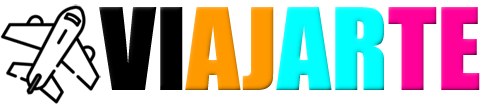
<style>
.page{position:relative;width:500px;height:104px;background:#ffffff}
.page>*{position:absolute;margin:0}
.t1{font:105.4px "Impact";color:#000000}
.t2{font:105.4px "Impact";color:#ff9900}
.t3{font:105.4px "Impact";color:#00ffff}
.t4{font:105.4px "Impact";color:#ff0099}
</style>
<div class="page">
<p class="t1" style="left:99px;top:7px;width:381px;height:83px">VI<span class="t2">AJ</span><span class="t3">AR</span><span class="t4">TE</span></p>
</div>
